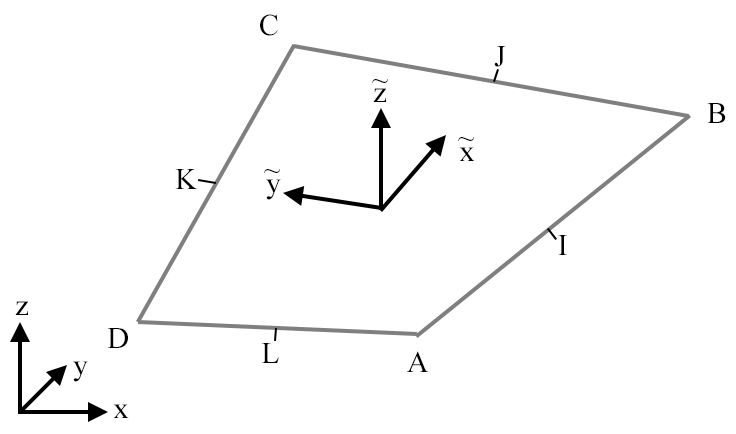
<style>
.page{position:relative;width:736px;height:434px;background:#ffffff}
.page>*{position:absolute;margin:0}
.t1{font:30px "TimesNewRomanPSMT";letter-spacing:-0.04em;color:#000000}
</style>
<div class="page">
<p class="t1" style="left:260px;top:14px;width:18px;height:22px">C</p>
<p class="t1" style="left:494px;top:46px;width:12px;height:21px">J</p>
<p class="t1" style="left:372px;top:79px;width:16px;height:4px">~</p>
<p class="t1" style="left:373px;top:88px;width:13px;height:14px">z</p>
<p class="t1" style="left:707px;top:103px;width:19px;height:20px">B</p>
<p class="t1" style="left:458px;top:137px;width:16px;height:4px">~</p>
<p class="t1" style="left:459px;top:147px;width:16px;height:14px">x</p>
<p class="t1" style="left:175px;top:169px;width:22px;height:20px">K</p>
<p class="t1" style="left:264px;top:169px;width:16px;height:4px">~</p>
<p class="t1" style="left:266px;top:179px;width:15px;height:21px">y</p>
<p class="t1" style="left:558px;top:235px;width:9px;height:20px">I</p>
<p class="t1" style="left:15px;top:301px;width:13px;height:14px">z</p>
<p class="t1" style="left:107px;top:328px;width:21px;height:20px">D</p>
<p class="t1" style="left:262px;top:343px;width:17px;height:20px">L</p>
<p class="t1" style="left:407px;top:351px;width:22px;height:21px">A</p>
<p class="t1" style="left:73px;top:361px;width:15px;height:21px">y</p>
<p class="t1" style="left:113px;top:404px;width:16px;height:14px">x</p>
</div>
